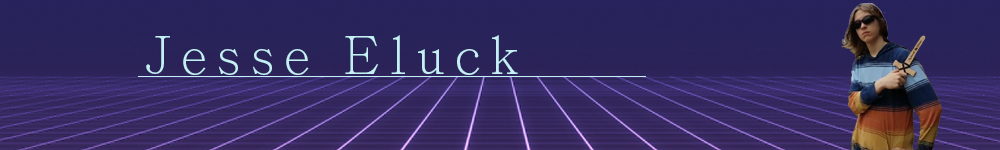
<style>
.page{position:relative;width:1000px;height:150px}
.page>*{position:absolute;margin:0}
.t1{font:52px "AdobeMingStd-Light";letter-spacing:0.2em;color:#c4f0f5}
</style>
<div class="page">
<p class="t1" style="left:146px;top:35px;width:372px;height:40px">Jesse Eluck</p>
</div>
